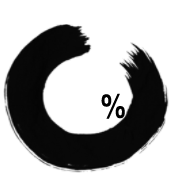
<style>
.page{position:relative;width:170px;height:180px;background:#ffffff}
.page>*{position:absolute;margin:0}
.t1{font:30px "MoeumTR-HM";color:#000000}
</style>
<div class="page">
<p class="t1" style="left:101px;top:93px;width:24px;height:26px">%</p>
</div>
